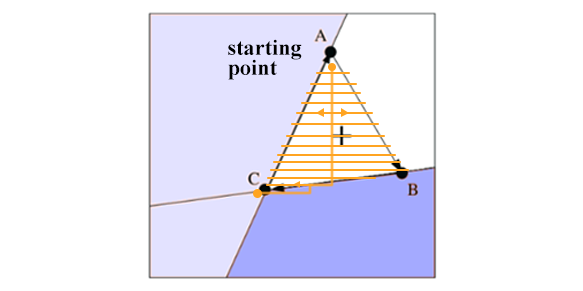
<style>
.page{position:relative;width:583px;height:291px;background:#ffffff}
.page>*{position:absolute;margin:0}
.t1{font:22.3px/20px "TimesNewRomanPS-BoldMT";color:#000000}
</style>
<div class="page">
<p class="t1" style="left:228px;top:39px;width:74px;height:41px">starting<br>point</p>
</div>
